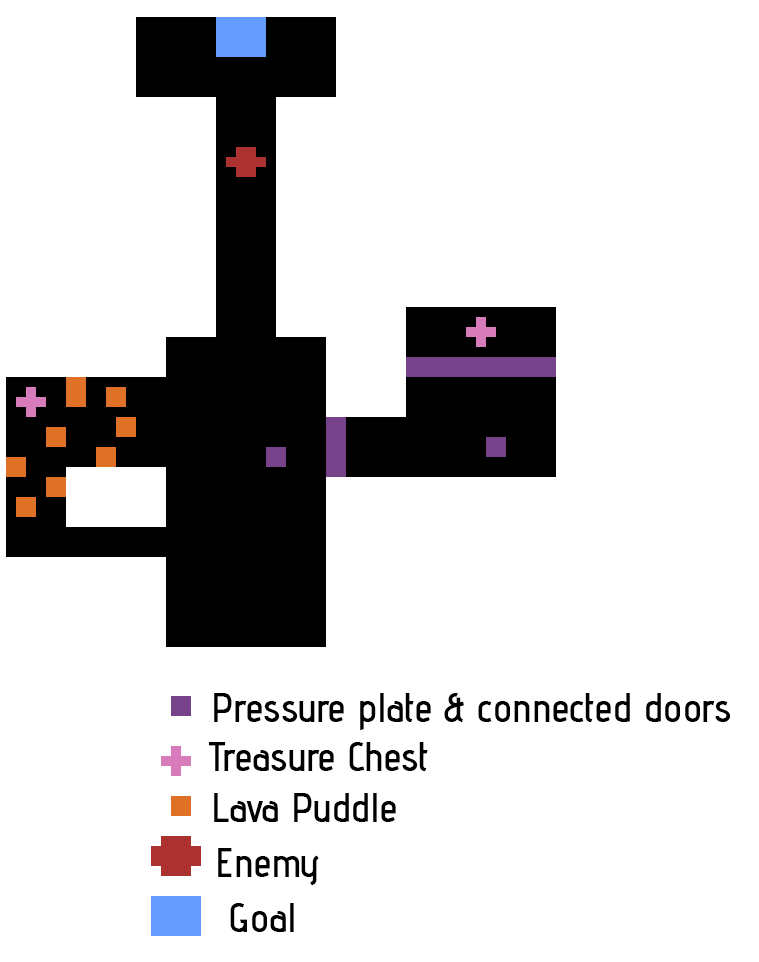
<style>
.page{position:relative;width:759px;height:962px;background:#ffffff}
.page>*{position:absolute;margin:0}
.t1{font:40px "AdventPro-SemiBold";color:#000000}
</style>
<div class="page">
<p class="t1" style="left:214px;top:693px;width:517px;height:37px">Pressure plate &amp; connected doors</p>
<p class="t1" style="left:209px;top:742px;width:219px;height:29px">Treasure Chest</p>
<p class="t1" style="left:214px;top:793px;width:182px;height:29px">Lava Puddle</p>
<p class="t1" style="left:218px;top:848px;width:101px;height:37px">Enemy</p>
<p class="t1" style="left:230px;top:903px;width:64px;height:29px">Goal</p>
</div>
